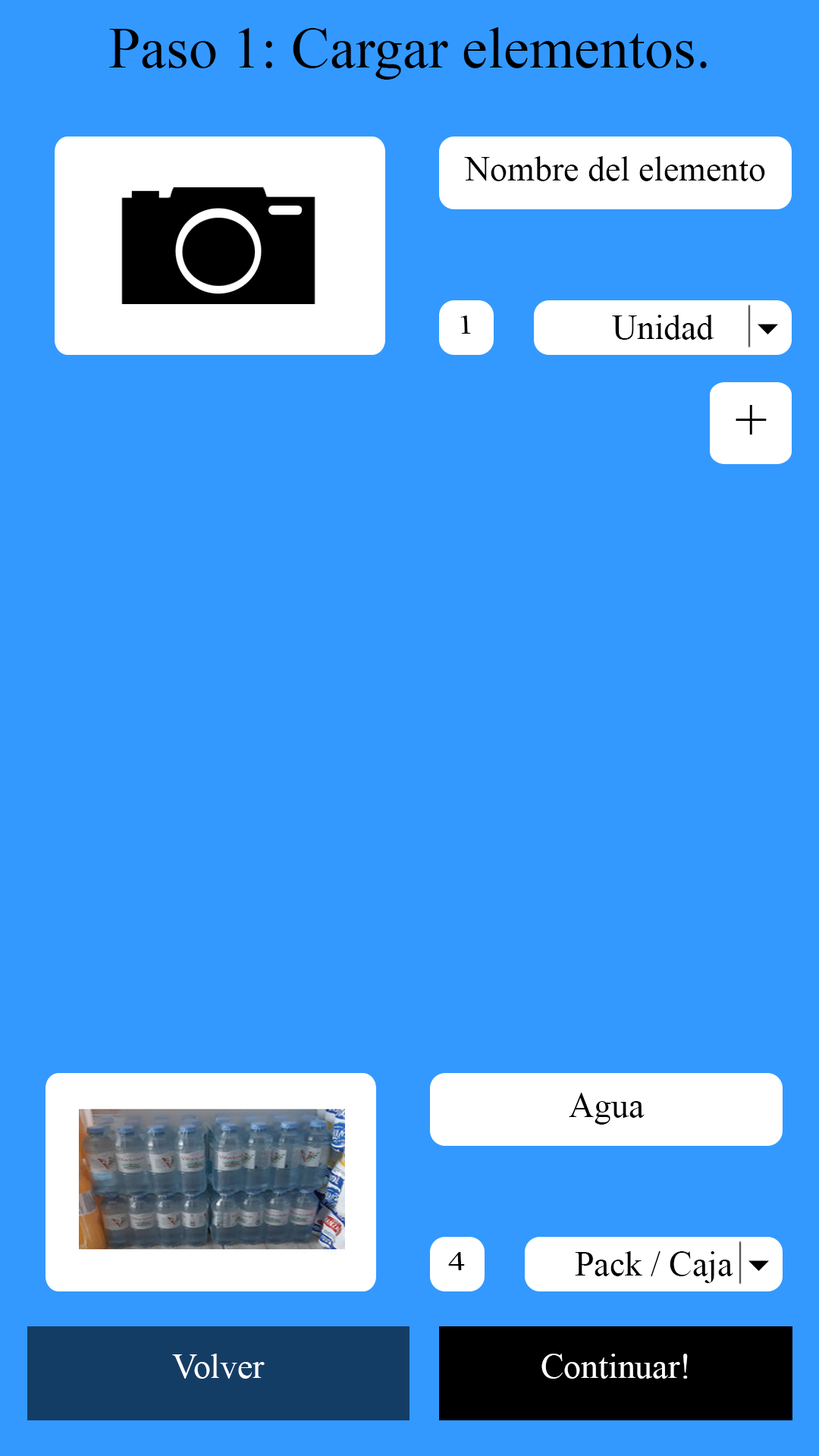
<style>
.page{position:relative;width:819px;height:1456px;background:#3399ff}
.page>*{position:absolute;margin:0}
.t1{font:57.8px "TimesNewRomanPSMT";color:#000000}
.t2{font:34.7px "TimesNewRomanPSMT";color:#000000}
.t3{font:27.4px "TimesNewRomanPSMT";color:#000000;scale:1.26 1}
.t4{font:34.7px "TimesNewRomanPSMT";color:#ffffff}
</style>
<div class="page">
<p class="t1" style="left:109px;top:27px;width:598px;height:53px">Paso 1: Cargar elementos.</p>
<p class="t2" style="left:464px;top:156px;width:301px;height:25px">Nombre del elemento</p>
<p class="t3" style="left:460px;top:315px;width:11px;height:19px">1</p>
<p class="t2" style="left:612px;top:315px;width:102px;height:25px">Unidad</p>
<p class="t1" style="left:736px;top:405px;width:31px;height:30px">+</p>
<p class="t2" style="left:569px;top:1093px;width:76px;height:32px">Agua</p>
<p class="t3" style="left:448px;top:1252px;width:17px;height:18px">4</p>
<p class="t2" style="left:575px;top:1251px;width:158px;height:32px">Pack / Caja</p>
<p class="t4" style="left:172px;top:1354px;width:93px;height:25px">Volver</p>
<p class="t4" style="left:541px;top:1354px;width:147px;height:25px">Continuar!</p>
</div>
